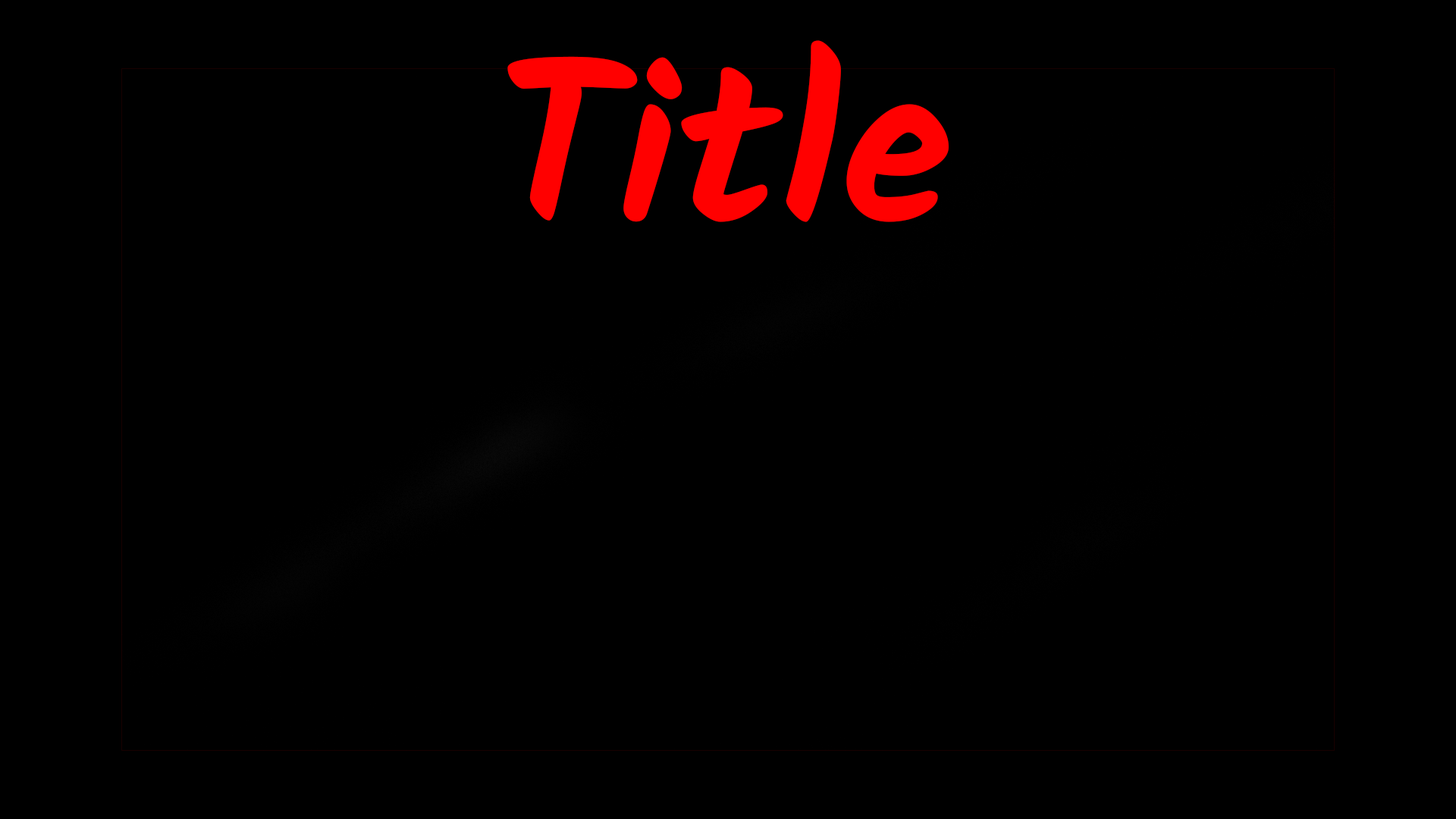
<style>
.page{position:relative;width:1456px;height:819px;background:#000000}
.page>*{position:absolute;margin:0}
.t1{font:227.5px "Kalam-Bold";color:#ff0000}
</style>
<div class="page">
<p class="t1" style="left:507px;top:40px;width:442px;height:182px">Title</p>
</div>
